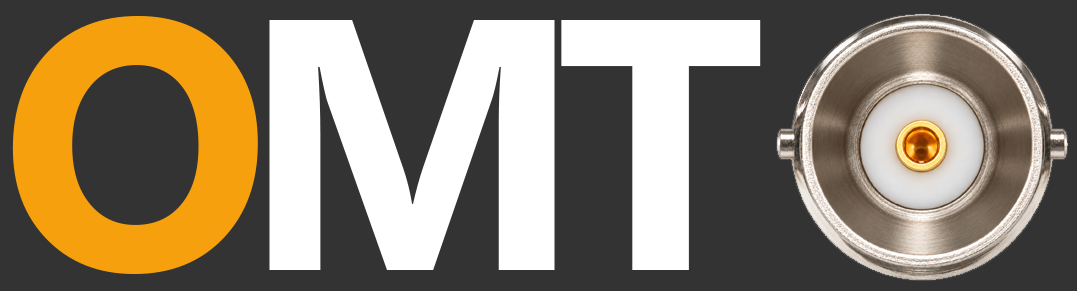
<style>
.page{position:relative;width:1077px;height:291px;background:#333333}
.page>*{position:absolute;margin:0}
.t1{font:356.5px "SegoeUI-Bold";letter-spacing:-0.075em;color:#f6a00d}
.t2{font:356.5px "SegoeUI-Bold";letter-spacing:-0.075em;color:#ffffff}
</style>
<div class="page">
<p class="t1" style="left:12px;top:16px;width:246px;height:258px">O</p>
<p class="t2" style="left:269px;top:20px;width:492px;height:250px">MT</p>
</div>
